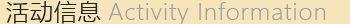
<style>
.page{position:relative;width:350px;height:24px;background:#f6e5ba}
.page>*{position:absolute;margin:0}
.t1{font:23px "MicrosoftYaHeiUILight";letter-spacing:0.04em;color:#212121}
.t2{font:23px "MicrosoftYaHeiUILight";letter-spacing:0.04em;color:#a0a0a0}
</style>
<div class="page">
<p class="t1" style="left:6px;top:1px;width:95px;height:23px">活动信息</p>
<p class="t2" style="left:108px;top:2px;width:218px;height:24px">Activity Information</p>
</div>
